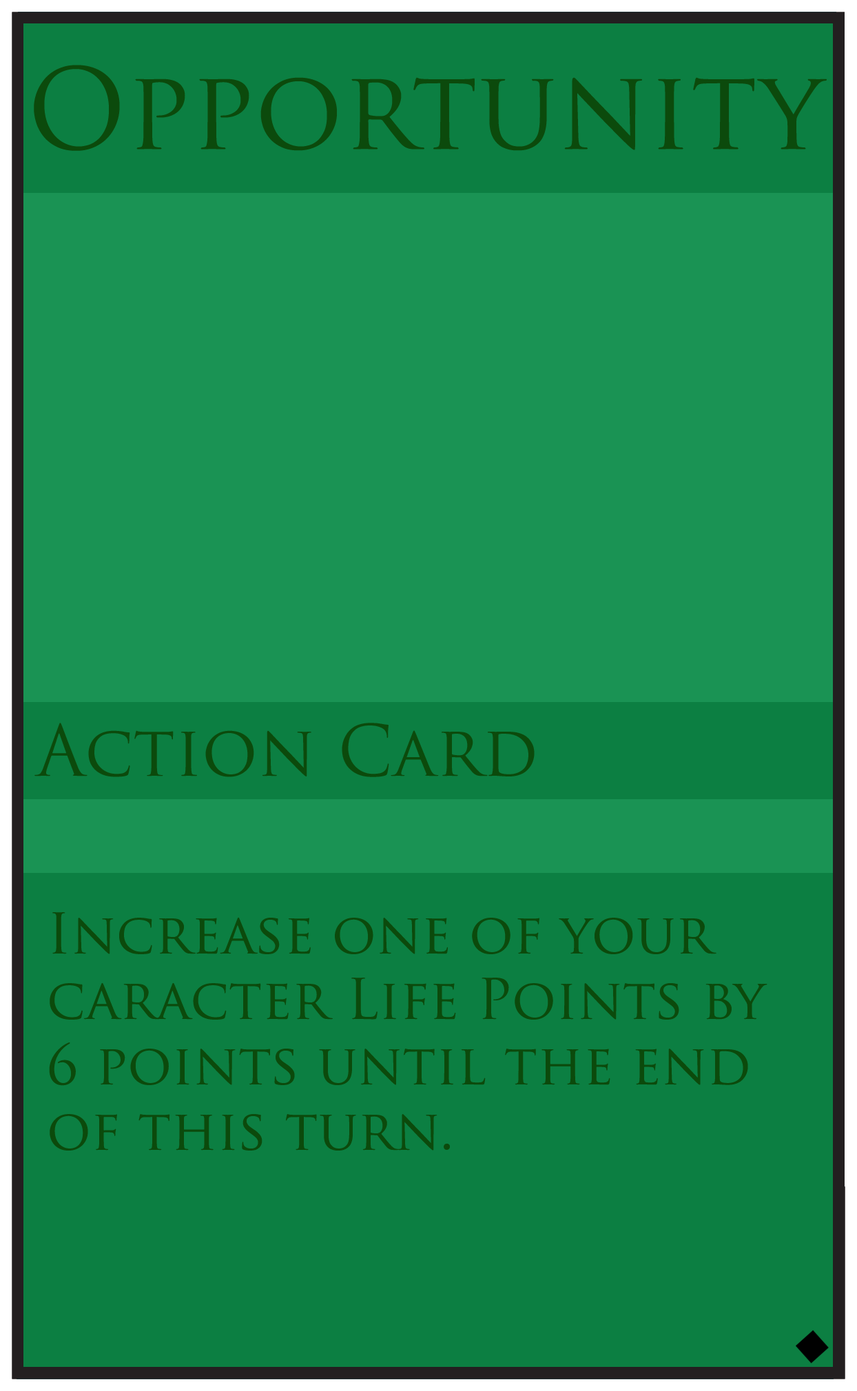
<style>
.page{position:relative;width:857px;height:1391px;background:#0c7f42}
.page>*{position:absolute;margin:0}
.t1{font:109.1px "TrajanPro-Regular";color:#0c4a0c}
.t2{font:68.9px "TrajanPro-Regular";color:#0c4a0c}
.t3{font:54.5px "TrajanPro-Regular";color:#0c4a0c}
</style>
<div class="page">
<p class="t1" style="left:34px;top:65px;width:793px;height:86px">Opportunity</p>
<p class="t2" style="left:34px;top:723px;width:501px;height:54px">Action Card</p>
<p class="t3" style="left:49px;top:912px;width:719px;height:239px">Increase one of your <br>caracter Life Points by <br>6 points until the end <br>of this turn.</p>
</div>
